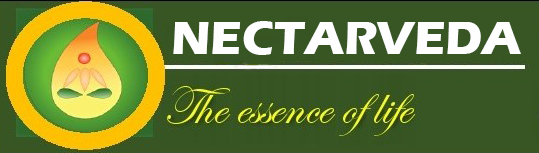
<style>
.page{position:relative;width:539px;height:153px}
.page>*{position:absolute;margin:0}
.t1{font:48px "ErasITC-Bold";color:#fefefe}
</style>
<div class="page">
<p class="t1" style="left:173px;top:21px;width:348px;height:34px">NECTARVEDA</p>
</div>
